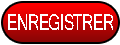
<style>
.page{position:relative;width:120px;height:45px;background:#ffffff}
.page>*{position:absolute;margin:0}
.t1{font:21.1px "Kartika";letter-spacing:-0.08em;color:#ffffff;scale:0.73 1}
</style>
<div class="page">
<p class="t1" style="left:8px;top:14px;width:105px;height:16px">ENREGISTRER</p>
</div>
